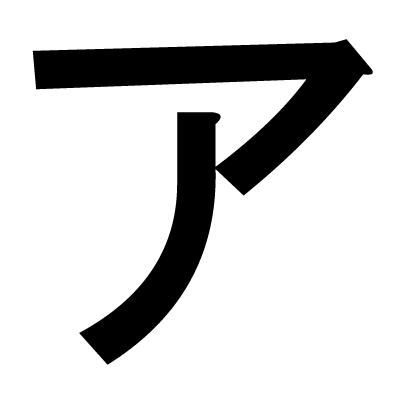
<style>
.page{position:relative;width:400px;height:400px;background:#ffffff}
.page>*{position:absolute;margin:0}
.t1{font:424.8px "MS-PGothic";color:#000000}
</style>
<div class="page">
<p class="t1" style="left:32px;top:39px;width:341px;height:326px">ア</p>
</div>
